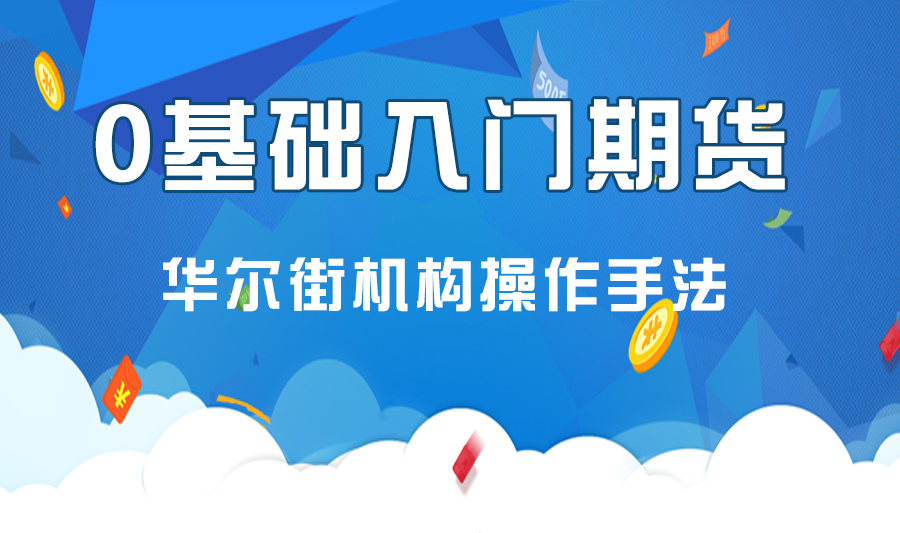
<style>
.page{position:relative;width:900px;height:533px;background:#ffffff}
.page>*{position:absolute;margin:0}
.t1{font:100px "DFZongYi-Bd-80-Win-GB";letter-spacing:0.06em;color:#ffffff}
.t2{font:100px "MicrosoftYaHeiUI-Bold";letter-spacing:0.06em;color:#ffffff}
.t3{font:60px "DFZongYi-Bd-80-Win-GB";letter-spacing:0.06em;color:#ffffff}
</style>
<div class="page">
<p class="t1" style="left:95px;top:99px;width:690px;height:91px"><span class="t2">0</span>基础入门期货</p>
<p class="t3" style="left:163px;top:257px;width:563px;height:55px">华尔街机构操作手法</p>
</div>
